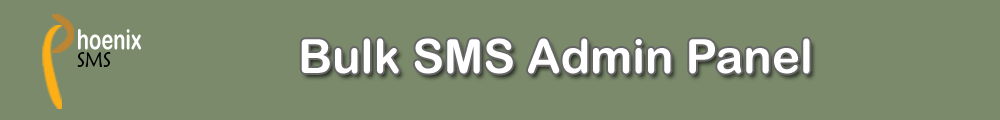
<style>
.page{position:relative;width:1000px;height:120px;background:#7b8a6b}
.page>*{position:absolute;margin:0}
.t1{font:27.8px "ArialRoundedMTBold";color:#fefefe;scale:0.73 1}
.t2{font:47.3px "ArialRoundedMTBold";color:#fefefe}
.t3{font:20.9px "MaiandraGD-Regular";color:#000000;scale:0.91 1}
</style>
<div class="page">
<p class="t1" style="left:78px;top:29px;width:63px;height:21px">hoenix</p>
<p class="t2" style="left:301px;top:38px;width:509px;height:36px">Bulk SMS Admin Panel</p>
<p class="t3" style="left:77px;top:52px;width:34px;height:15px">SMS</p>
</div>
